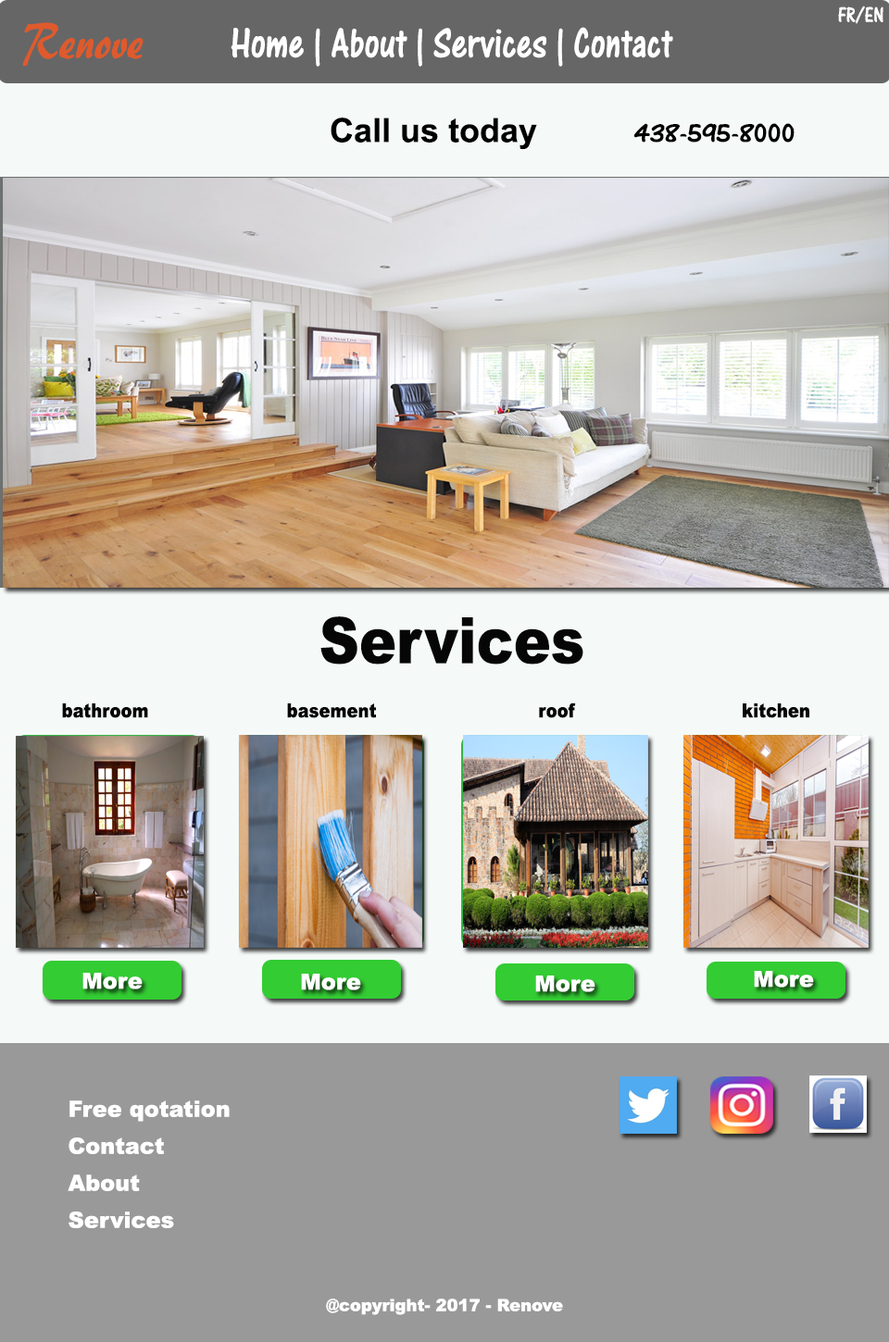
<style>
.page{position:relative;width:889px;height:1342px;background:#f5faf8}
.page>*{position:absolute;margin:0}
.t1{font:22.2px "ARCENA";color:#ffffff;scale:0.86 1}
.t2{font:51.5px "ARBERKLEY";color:#df5a2c;scale:0.86 1}
.t3{font:44.4px "ARCENA";color:#ffffff;scale:0.86 1}
.t4{font:33.3px "Arial-BoldMT";color:#000000}
.t5{font:27.8px "ARCENA";color:#000000}
.t6{font:63.9px "Arial-Black";color:#060606;scale:0.87 1}
.t7{font:19.2px "Arial-Black";color:#060606;scale:0.87 1}
.t8{font:22.2px "Arial-Black";color:#ffffff}
.t9{font:22.2px/18.5px "Arial-Black";color:#ffffff}
.t10{font:16.7px "Arial-Black";color:#ffffff}
</style>
<div class="page">
<p class="t1" style="left:838px;top:6px;width:45px;height:18px">FR/EN</p>
<p class="t2" style="left:22px;top:22px;width:121px;height:45px">Renove</p>
<p class="t3" style="left:230px;top:27px;width:443px;height:40px">Home | About | Services | Contact</p>
<p class="t4" style="left:330px;top:118px;width:207px;height:32px">Call us today</p>
<p class="t5" style="left:633px;top:123px;width:161px;height:20px">438-595-8000</p>
<p class="t6" style="left:320px;top:616px;width:263px;height:49px">Services</p>
<p class="t7" style="left:62px;top:703px;width:86px;height:15px">bathroom</p>
<p class="t7" style="left:287px;top:703px;width:90px;height:15px">basement</p>
<p class="t7" style="left:539px;top:702px;width:37px;height:16px">roof</p>
<p class="t7" style="left:742px;top:703px;width:67px;height:15px">kitchen</p>
<p class="t8" style="left:82px;top:973px;width:61px;height:16px">More</p>
<p class="t8" style="left:301px;top:974px;width:60px;height:16px">More</p>
<p class="t8" style="left:535px;top:976px;width:60px;height:16px">More</p>
<p class="t8" style="left:753px;top:971px;width:61px;height:17px">More</p>
<p class="t9" style="left:68px;top:1100px;width:162px;height:128px">Free qotation<br><br>Contact<br><br>About<br><br>Services</p>
<p class="t10" style="left:326px;top:1299px;width:237px;height:16px">@copyright- 2017 - Renove</p>
</div>
